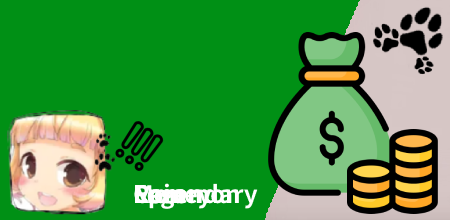
<style>
.page{position:relative;width:450px;height:220px;background:#009015}
.page>*{position:absolute;margin:0}
.t1{font:24px "NotoSansKR-Bold";color:#ffffff}
.t2{font:24px "NotoSansKR-Bold";color:#aa46b8}
</style>
<div class="page">
<p class="t1" style="left:134px;top:184px;width:105px;height:20px"><span class="t2">C</span>ommon</p>
<p class="t1" style="left:135px;top:185px;width:52px;height:19px">Rare</p>
<p class="t1" style="left:135px;top:183px;width:48px;height:26px">Epic</p>
<p class="t1" style="left:135px;top:183px;width:123px;height:26px">Legendary</p>
<p class="t1" style="left:135px;top:185px;width:77px;height:24px">Money</p>
</div>
